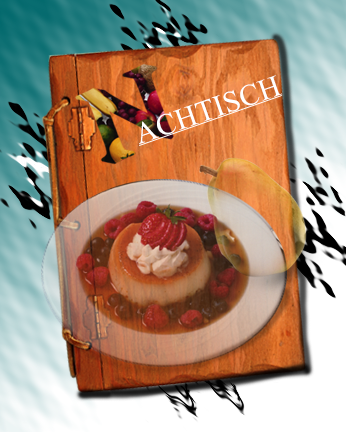
<style>
.page{position:relative;width:346px;height:432px}
.page>*{position:absolute;margin:0}
.t1{font:30px "TimesNewRomanPSMT";letter-spacing:0.01em;color:#ffffff}
</style>
<div class="page">
<p class="t1" style="left:139px;top:75px;width:143px;height:70px;rotate:-19deg">ACHTISCH</p>
</div>
